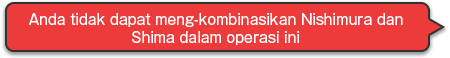
<style>
.page{position:relative;width:450px;height:58px;background:#ed3b3b}
.page>*{position:absolute;margin:0}
.t1{font:14px/18px "GothicMB101Pro-Regular";color:#ffffff}
</style>
<div class="page">
<p class="t1" style="left:29px;top:13px;width:374px;height:32px;text-align:center">Anda tidak dapat meng-kombinasikan Nishimura dan<br>Shima dalam operasi ini</p>
</div>
